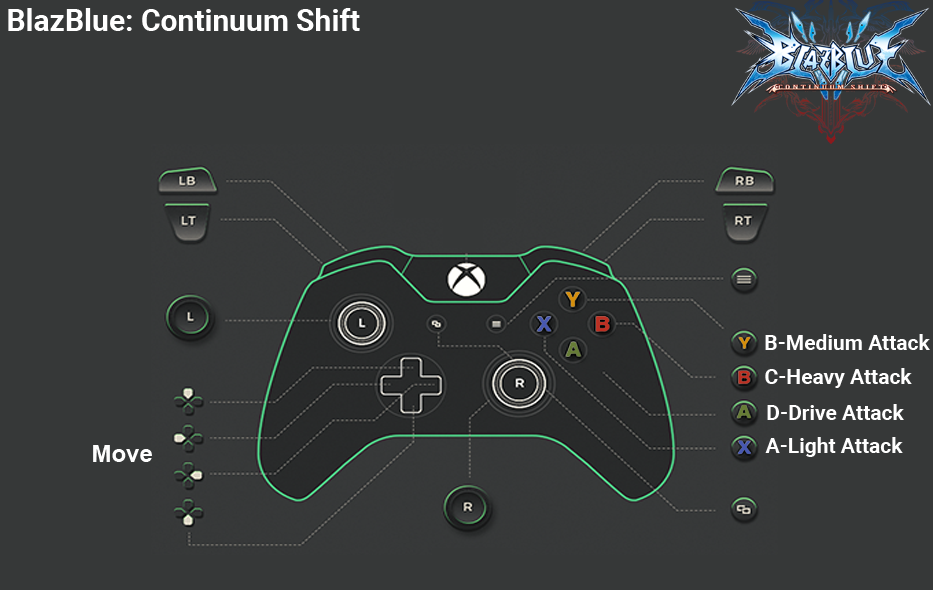
<style>
.page{position:relative;width:933px;height:590px;background:#363838}
.page>*{position:absolute;margin:0}
.t1{font:30px "Roboto-Bold";color:#ffffff}
.t2{font:21px "Roboto-Bold";color:#ffffff}
.t3{font:24px "Arial-BoldMT";color:#fefefe}
</style>
<div class="page">
<p class="t1" style="left:8px;top:8px;width:352px;height:23px">BlazBlue: Continuum Shift</p>
<p class="t2" style="left:765px;top:334px;width:165px;height:16px">B-Medium Attack</p>
<p class="t2" style="left:765px;top:368px;width:147px;height:20px">C-Heavy Attack</p>
<p class="t2" style="left:767px;top:404px;width:137px;height:16px">D-Drive Attack</p>
<p class="t2" style="left:765px;top:437px;width:138px;height:20px">A-Light Attack</p>
<p class="t3" style="left:93px;top:445px;width:59px;height:17px">Move</p>
</div>
